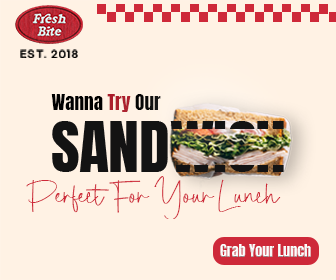
<style>
.page{position:relative;width:336px;height:280px;background:#fff2e4}
.page>*{position:absolute;margin:0}
.t1{font:9.2px "GmarketSansMedium";letter-spacing:0.15em;color:#000000}
.t2{font:18.3px "Anton-Regular";color:#000000;scale:1.05 1}
.t3{font:18.3px "Anton-Regular";color:#ab1c2a;scale:1.05 1}
.t4{font:38.7px "SabrinaDestiny";letter-spacing:-0.05em;color:#ce2939;scale:1.05 1}
.t5{font:14.2px "Anton-Regular";color:#ffffff}
</style>
<div class="page">
<p class="t1" style="left:20px;top:49px;width:58px;height:9px">EST. 2018</p>
<p class="t2" style="left:51px;top:94px;width:110px;height:18px">Wanna <span class="t3">Try </span>Our</p>
<p class="t4" style="left:26px;top:176px;width:255px;height:43px">Perfect For Your Lunch</p>
<p class="t5" style="left:220px;top:244px;width:91px;height:13px">Grab Your Lunch</p>
</div>
